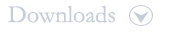
<style>
.page{position:relative;width:184px;height:32px;background:#ffffff}
.page>*{position:absolute;margin:0}
.t1{font:24.5px "Garamond";letter-spacing:-0.005em;color:#c5cdd8}
</style>
<div class="page">
<p class="t1" style="left:8px;top:5px;width:108px;height:18px">Downloads</p>
</div>
